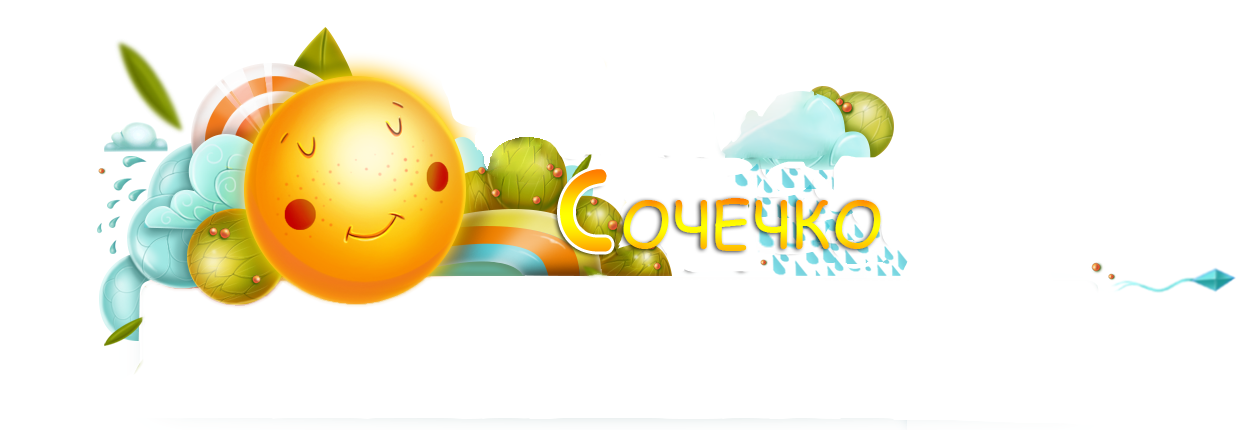
<style>
.page{position:relative;width:1240px;height:430px;background:#ffffff}
.page>*{position:absolute;margin:0}
.t1{font:64.4px "ComicSansMS";text-transform:uppercase}
</style>
<div class="page">
<p class="t1" style="left:623px;top:198px;width:258px;height:53px">очечко</p>
</div>
